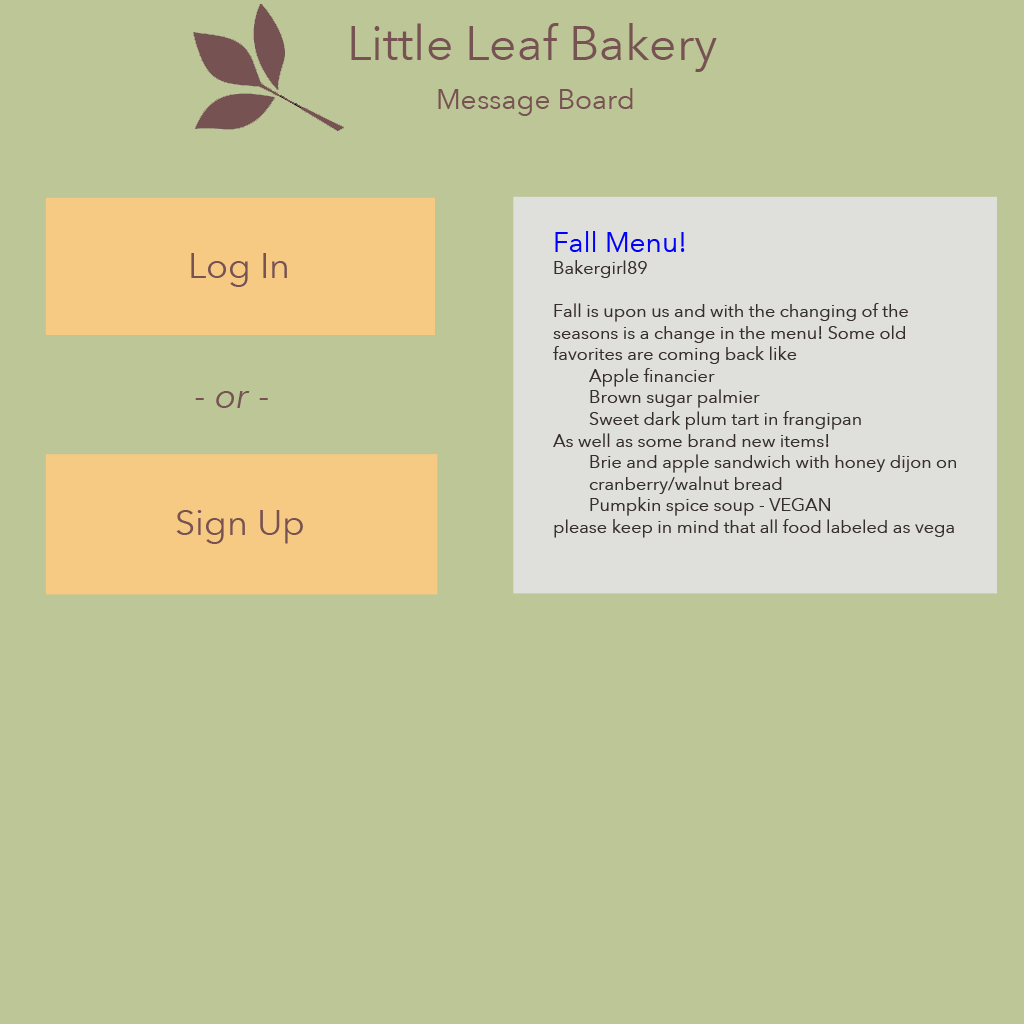
<style>
.page{position:relative;width:1024px;height:1024px;background:#bdc696}
.page>*{position:absolute;margin:0}
.t1{font:48px "AvenirNext-Regular";color:#775253}
.t2{font:28px "AvenirNext-Regular";color:#775253}
.t3{font:18px "AvenirNext-Regular";color:#362f2d}
.t4{font:28px "AvenirNext-Regular";color:#0000ff}
.t5{font:36px "AvenirNext-Regular";color:#775253}
.t6{font:36px "AvenirNext-Italic";color:#775253}
</style>
<div class="page">
<p class="t1" style="left:351px;top:23px;width:366px;height:49px">Little Leaf Bakery</p>
<p class="t2" style="left:438px;top:88px;width:195px;height:28px">Message Board</p>
<p class="t3" style="left:553px;top:231px;width:403px;height:307px"><span class="t4">Fall Menu!<br></span>Bakergirl89<br><br>Fall is upon us and with the changing of the seasons is a change in the menu! Some old favorites are coming back like <br> Apple financier <br> Brown sugar palmier<br> Sweet dark plum tart in frangipan<br>As well as some brand new items! <br> Brie and apple sandwich with honey dijon on          cranberry/walnut bread<br> Pumpkin spice soup - VEGAN<br>please keep in mind that all food labeled as vega</p>
<p class="t5" style="left:191px;top:253px;width:96px;height:34px">Log In</p>
<p class="t6" style="left:195px;top:391px;width:73px;height:17px"><span class="t5">- </span>or<span class="t5"> -</span></p>
<p class="t5" style="left:176px;top:510px;width:127px;height:34px">Sign Up</p>
</div>
